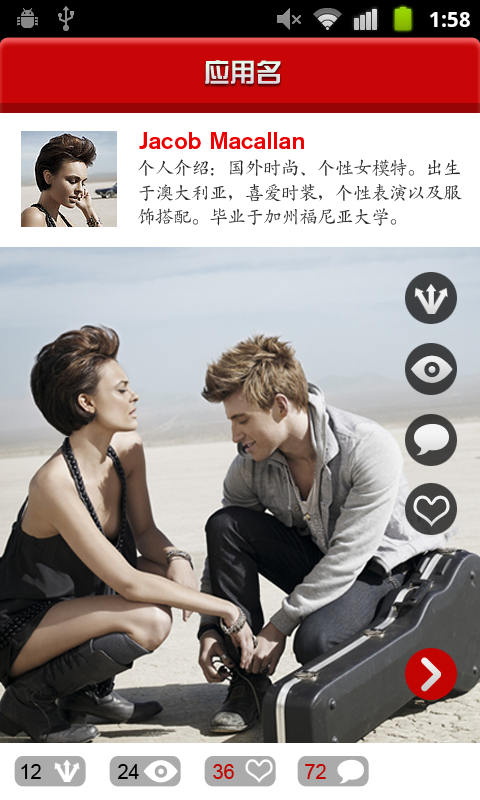
<style>
.page{position:relative;width:480px;height:800px}
.page>*{position:absolute;margin:0}
.t1{font:26px "HYk1gj";color:#e1ece7}
.t2{font:24px "AkzidenzGroteskBQ-Medium";color:#ec0001}
.t3{font:18px/24.6px "CTKaiTiSJ";color:#272727}
.t4{font:20px "ArialMT";color:#000000}
.t5{font:20px "ArialMT";color:#c10401}
</style>
<div class="page">
<p class="t1" style="left:205px;top:60px;width:76px;height:24px">应用名</p>
<p class="t2" style="left:139px;top:132px;width:165px;height:17px">Jacob Macallan</p>
<p class="t3" style="left:138px;top:159px;width:324px;height:67px">个人介绍：国外时尚、个性女模特。出生<br>于澳大利亚，喜爱时装，个性表演以及服<br>饰搭配。毕业于加州福尼亚大学。</p>
<p class="t4" style="left:21px;top:764px;width:20px;height:15px">12</p>
<p class="t4" style="left:118px;top:764px;width:21px;height:15px">24</p>
<p class="t5" style="left:213px;top:764px;width:21px;height:15px">36</p>
<p class="t5" style="left:305px;top:764px;width:21px;height:15px">72</p>
</div>
